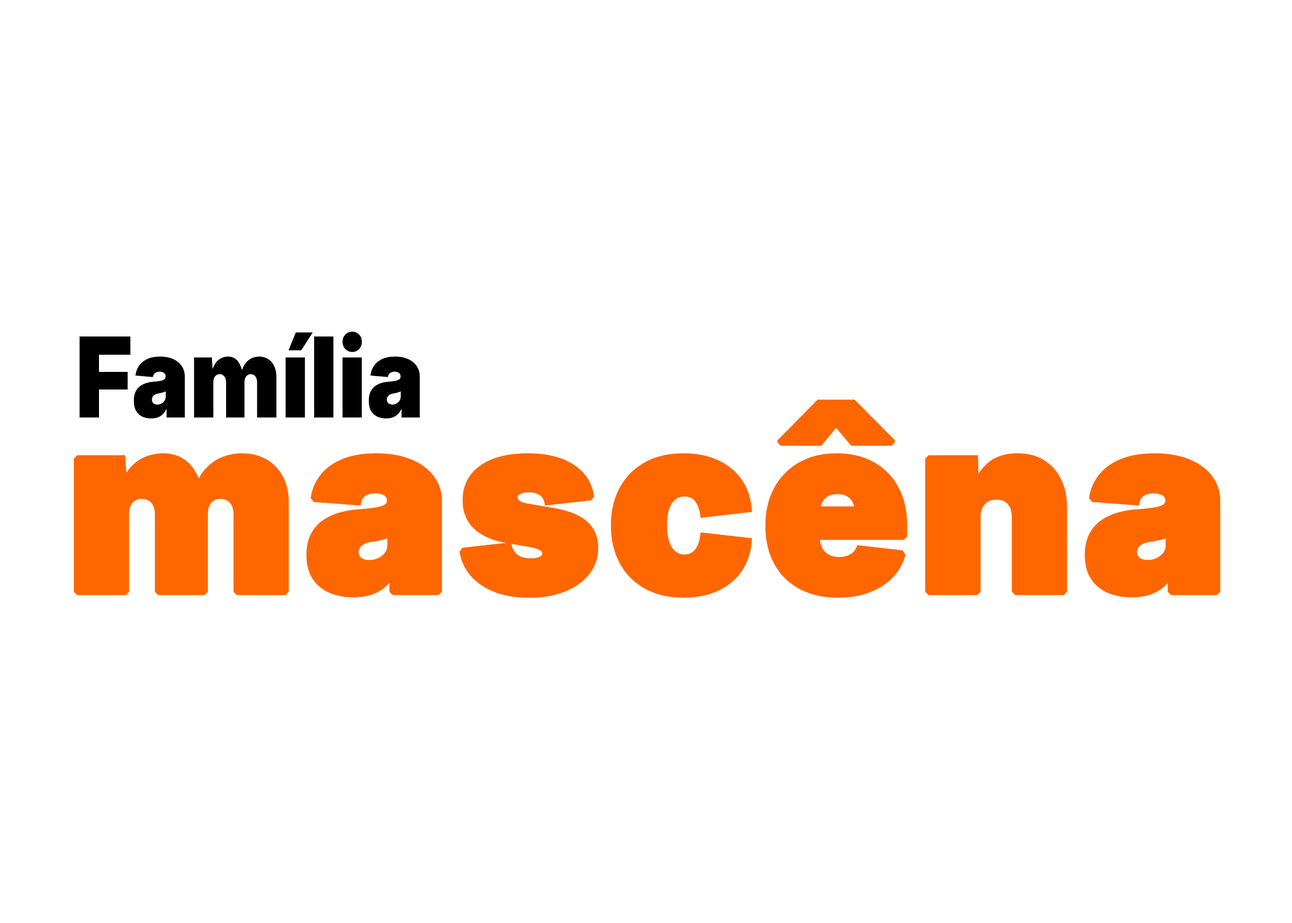
<style>
.page{position:relative;width:1292px;height:923px;background:#ffffff}
.page>*{position:absolute;margin:0}
.t1{font:111px "Inter18pt-Black";color:#000000;scale:0.88 1}
.t2{font:246.9px "Inter18pt-Black";color:#ff6600;font-weight:bold}
</style>
<div class="page">
<p class="t1" style="left:79px;top:331px;width:341px;height:88px">Família</p>
<p class="t2" style="left:73px;top:400px;width:1147px;height:198px">mascêna</p>
</div>
